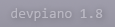
<style>
.page{position:relative;width:115px;height:27px}
.page>*{position:absolute;margin:0}
.t1{font:14px "Consolas";color:#bab8c3}
</style>
<div class="page">
<p class="t1" style="left:11px;top:8px;width:92px;height:13px">devpiano 1.8</p>
</div>
